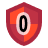
<style>
.page{position:relative;width:48px;height:48px;background:#ffffff}
.page>*{position:absolute;margin:0}
.t1{font:22.5px "ArialRoundedMTBold";letter-spacing:0.12em;color:#000000;font-weight:bold;scale:0.67 1}
</style>
<div class="page">
<p class="t1" style="left:19px;top:15px;width:9px;height:18px">0</p>
</div>
